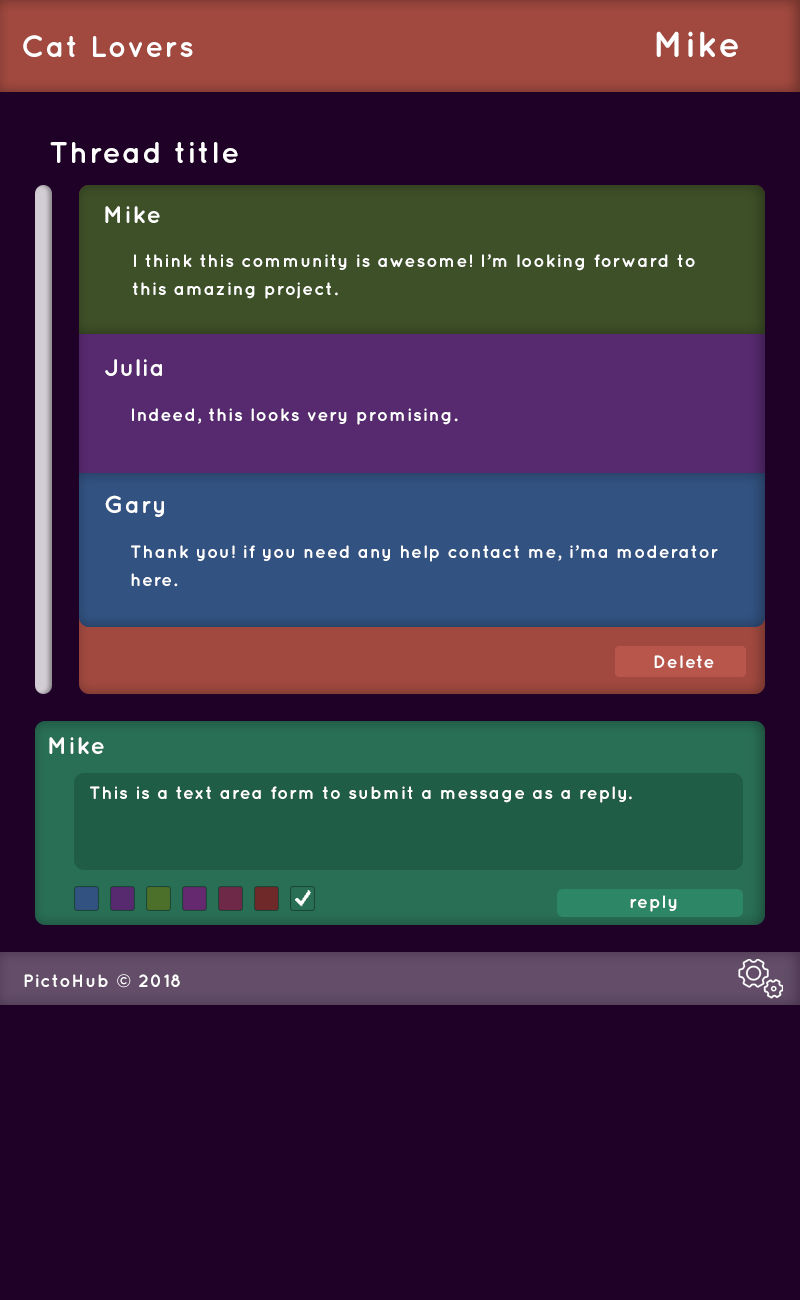
<style>
.page{position:relative;width:800px;height:1300px;background:#1f0026}
.page>*{position:absolute;margin:0}
.t1{font:30px "Quicksand-Bold";letter-spacing:0.05em;color:#ffffff}
.t2{font:36px "Quicksand-Bold";letter-spacing:0.05em;color:#ffffff}
.t3{font:24px "Quicksand-Bold";letter-spacing:0.05em;color:#ffffff}
.t4{font:18px/14px "Quicksand-Bold";letter-spacing:0.05em;color:#ffffff}
.t5{font:18px "Quicksand-Bold";letter-spacing:0.05em;color:#ffffff}
</style>
<div class="page">
<p class="t1" style="left:23px;top:35px;width:170px;height:22px">Cat Lovers</p>
<p class="t2" style="left:656px;top:31px;width:82px;height:26px">Mike</p>
<p class="t1" style="left:50px;top:142px;width:188px;height:21px">Thread title</p>
<p class="t3" style="left:105px;top:206px;width:55px;height:17px">Mike</p>
<p class="t4" style="left:132px;top:254px;width:563px;height:45px">I think this community is awesome! I’m looking forward to<br><br>this amazing project.</p>
<p class="t3" style="left:105px;top:359px;width:57px;height:17px">Julia</p>
<p class="t5" style="left:132px;top:408px;width:326px;height:17px">Indeed, this looks very promising.</p>
<p class="t3" style="left:105px;top:495px;width:59px;height:22px">Gary</p>
<p class="t4" style="left:131px;top:545px;width:587px;height:42px">Thank you! if you need any help contact me, i’ma moderator<br><br>here.</p>
<p class="t5" style="left:654px;top:655px;width:60px;height:13px">Delete</p>
<p class="t5" style="left:654px;top:655px;width:60px;height:13px">Delete</p>
<p class="t3" style="left:49px;top:737px;width:55px;height:17px">Mike</p>
<p class="t5" style="left:90px;top:786px;width:542px;height:17px">This is a text area form to submit a message as a reply.</p>
<p class="t5" style="left:630px;top:895px;width:47px;height:17px">reply</p>
<p class="t5" style="left:24px;top:974px;width:156px;height:14px">PictoHub © 2018</p>
</div>
